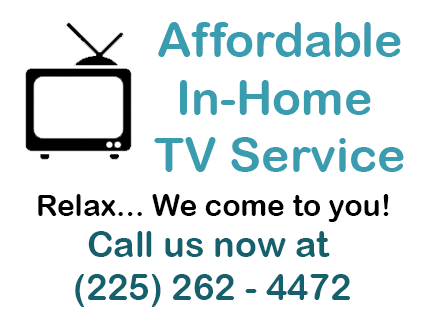
<style>
.page{position:relative;width:432px;height:326px;background:#ffffff}
.page>*{position:absolute;margin:0}
.t1{font:48px "ArialRoundedMTBold";color:#3a9daf}
.t2{font:30px "ArialRoundedMTBold";color:#000000}
.t3{font:36px "ArialRoundedMTBold";color:#15606d}
</style>
<div class="page">
<p class="t1" style="left:154px;top:22px;width:250px;height:150px;text-align:center">Affordable<br>In-Home <br>TV Service</p>
<p class="t2" style="left:38px;top:194px;width:351px;height:28px">Relax... We come to you!</p>
<p class="t3" style="left:75px;top:231px;width:275px;height:76px;text-align:center">Call us now at <br>(225) 262 - 4472</p>
</div>
